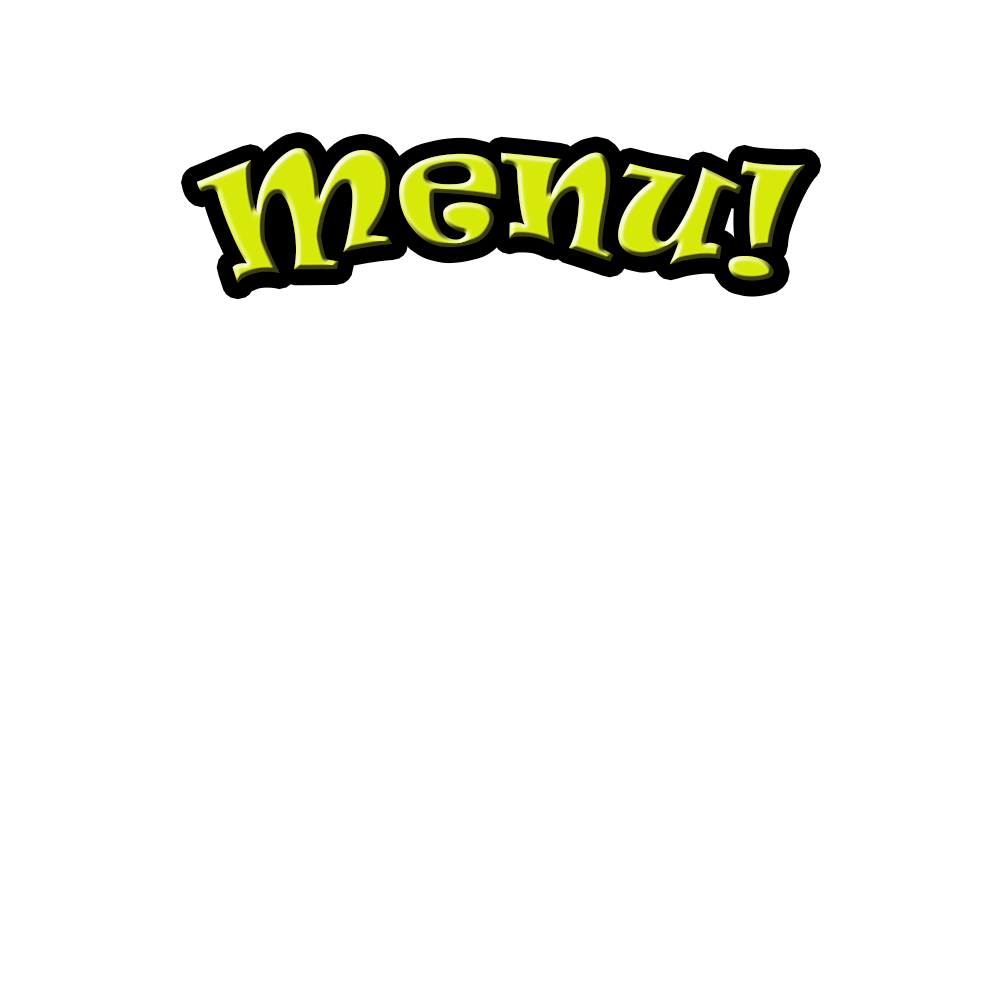
<style>
.page{position:relative;width:1000px;height:1000px;background:#ffffff}
.page>*{position:absolute;margin:0}
.t1{font:81.1px "Ravie"}
</style>
<div class="page">
<p class="t1" style="left:197px;top:148px;width:609px;height:136px">Menu!</p>
</div>
